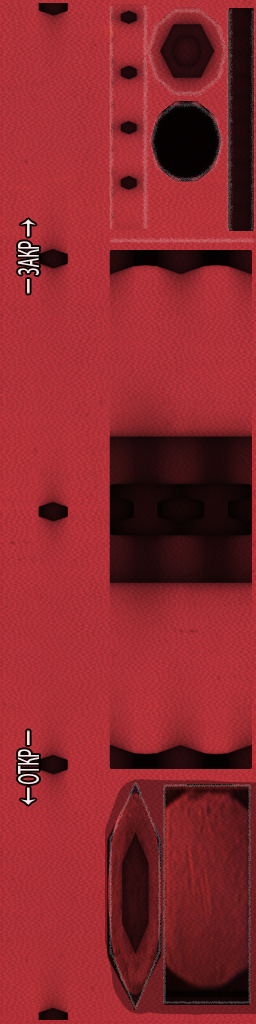
<style>
.page{position:relative;width:256px;height:1024px}
.page>*{position:absolute;margin:0}
.t1{font:31px "MyriadPro-Regular";color:#ffffff;scale:0.51 1}
</style>
<div class="page">
<p class="t1" style="left:18px;top:241px;width:21px;height:35px;rotate:-90deg;opacity:0.9">ЗАКР</p>
<p class="t1" style="left:18px;top:749px;width:21px;height:35px;rotate:-90deg;opacity:0.9">ОТКР</p>
</div>
